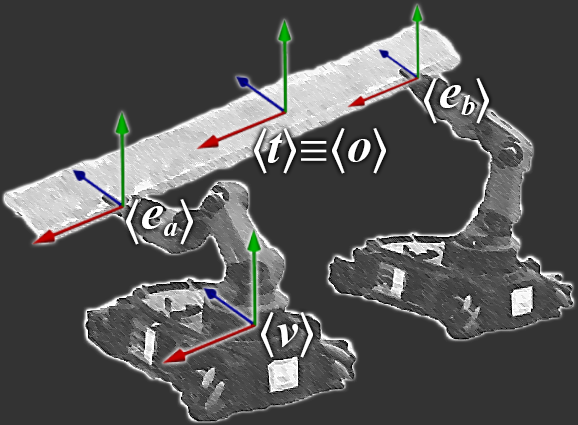
<style>
.page{position:relative;width:578px;height:425px;background:#333333}
.page>*{position:absolute;margin:0}
.t1{font:50.2px "TimesNewRomanPS-BoldItalicMT";color:#ffffff}
.t2{font:50.2px "CambriaMath";color:#ffffff}
.t3{font:50px "CambriaMath";color:#ffffff}
.t4{font:50px "TimesNewRomanPS-BoldItalicMT";color:#ffffff}
.t5{font:41.9px "CambriaMath";color:#ffffff}
</style>
<div class="page">
<p class="t1" style="left:424px;top:78px;width:65px;height:46px"><span class="t2">⟨</span>eb<span class="t2">⟩</span></p>
<p class="t3" style="left:254px;top:128px;width:132px;height:46px">⟨<span class="t4">t</span>⟩<span class="t5">≡</span>⟨<span class="t4">o</span>⟩</p>
<p class="t1" style="left:126px;top:199px;width:67px;height:46px"><span class="t2">⟨</span>ea<span class="t2">⟩</span></p>
<p class="t2" style="left:261px;top:312px;width:52px;height:46px">⟨<span class="t1">v</span>⟩</p>
</div>
